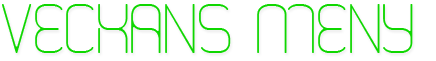
<style>
.page{position:relative;width:436px;height:61px;background:#ffffff}
.page>*{position:absolute;margin:0}
.t1{font:51px "happysquid";color:#0fd700}
</style>
<div class="page">
<p class="t1" style="left:2px;top:4px;width:411px;height:49px">Veckans meny</p>
</div>
